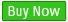
<style>
.page{position:relative;width:68px;height:22px;background:#34c51a}
.page>*{position:absolute;margin:0}
.t1{font:14px "HelveticaNeueLTStd-Cn";letter-spacing:0.04em;color:#ffffff}
.t2{font:14px "Tahoma";letter-spacing:0.04em;color:#ffffff}
</style>
<div class="page">
<p class="t1" style="left:8px;top:6px;width:52px;height:13px">Buy N<span class="t2">ow</span></p>
</div>
